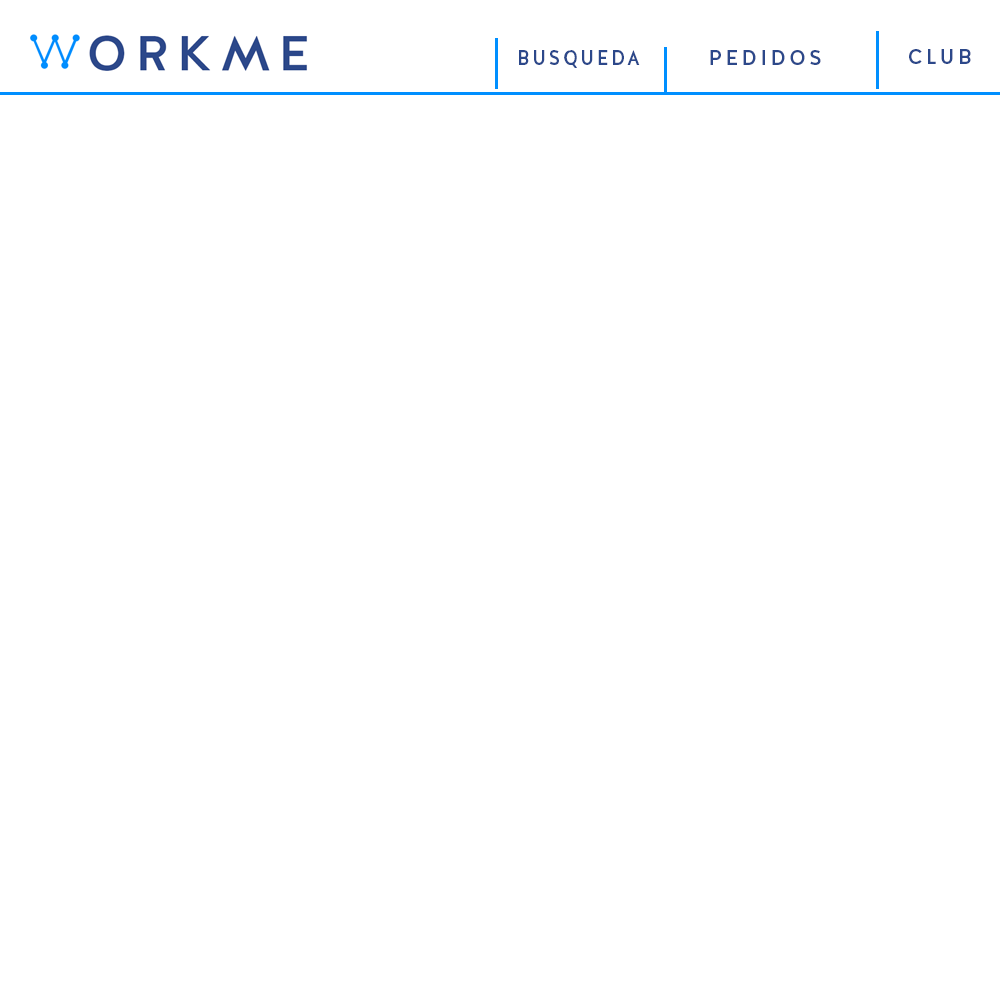
<style>
.page{position:relative;width:1000px;height:1000px;background:#ffffff}
.page>*{position:absolute;margin:0}
.t1{font:20.6px "HalisGR-Medium";letter-spacing:0.16em;color:#2c488a;scale:0.88 1}
.t2{font:20.6px "HalisGR-Medium";letter-spacing:0.16em;color:#2c488a}
</style>
<div class="page">
<p class="t1" style="left:519px;top:50px;width:121px;height:18px">BUSQUEDA</p>
<p class="t2" style="left:710px;top:50px;width:111px;height:15px">PEDIDOS</p>
<p class="t2" style="left:909px;top:49px;width:62px;height:15px">CLUB</p>
</div>
